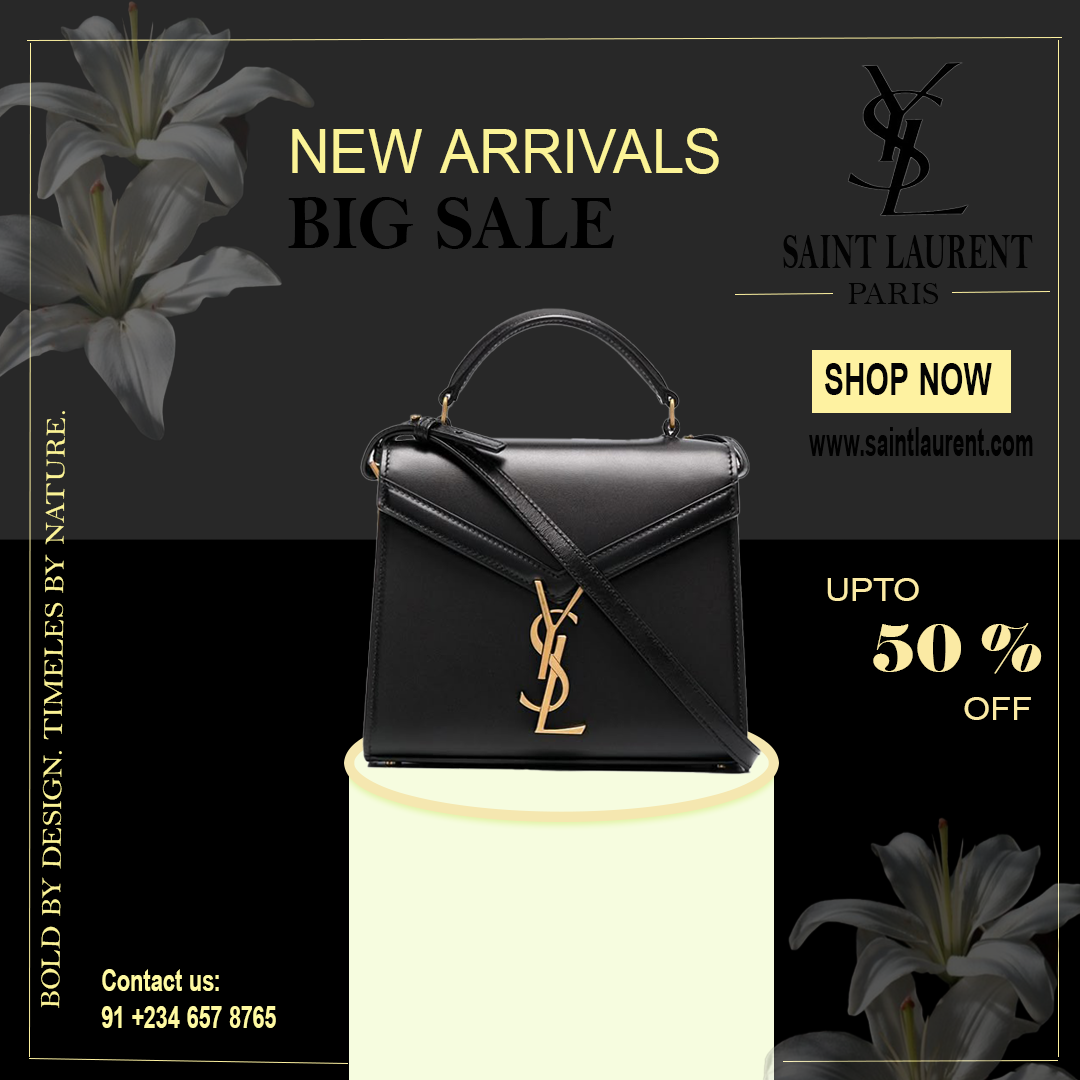
<style>
.page{position:relative;width:1080px;height:1080px;background:#282828}
.page>*{position:absolute;margin:0}
.t1{font:60.9px "ArialMT";letter-spacing:0.01em;color:#fbf396;scale:0.96 1}
.t2{font:76.8px "BellMTBold";letter-spacing:0.01em;color:#000000;scale:0.93 1}
.t3{font:52.5px "BellMTBold";letter-spacing:0.01em;color:#020202;scale:0.57 1}
.t4{font:31.7px "BellMT";letter-spacing:0.01em;color:#020202;scale:1.04 1}
.t5{font:45.2px "Arial-BoldMT";letter-spacing:0.01em;color:#040404;scale:0.67 1}
.t6{font:27.8px "BellMT";letter-spacing:0.01em;color:#fbf396;scale:1.11 1}
.t7{font:40.2px "Arial-BoldMT";letter-spacing:0.01em;color:#010101;scale:0.53 1}
.t8{font:32.2px "ArialMT";letter-spacing:0.01em;color:#fbeaa4;scale:1.09 1}
.t9{font:63.5px "Elephant-Regular";letter-spacing:0.01em;color:#fbeaa4}
.t10{font:31.4px "Arial-BoldMT";letter-spacing:0.01em;color:#fef9a1;scale:0.7 1}
</style>
<div class="page">
<p class="t1" style="left:292px;top:128px;width:427px;height:46px">NEW ARRIVALS</p>
<p class="t2" style="left:288px;top:197px;width:326px;height:52px">BIG SALE</p>
<p class="t3" style="left:783px;top:235px;width:250px;height:33px">SAINT LAURENT</p>
<p class="t4" style="left:848px;top:283px;width:90px;height:21px">PARIS</p>
<p class="t5" style="left:825px;top:363px;width:167px;height:32px">SHOP NOW</p>
<p class="t6" style="left:40px;top:411px;width:26px;height:597px;rotate:-89deg">BOLD BY DESIGN. TIMELES BY NATURE.</p>
<p class="t7" style="left:809px;top:427px;width:224px;height:29px">www.saintlaurent.com</p>
<p class="t8" style="left:827px;top:578px;width:92px;height:23px">UPTO</p>
<p class="t9" style="left:873px;top:623px;width:169px;height:51px">50 %</p>
<p class="t8" style="left:964px;top:697px;width:67px;height:23px">OFF</p>
<p class="t10" style="left:101px;top:969px;width:175px;height:59px">Contact us:<br>91 +234 657 8765</p>
</div>
